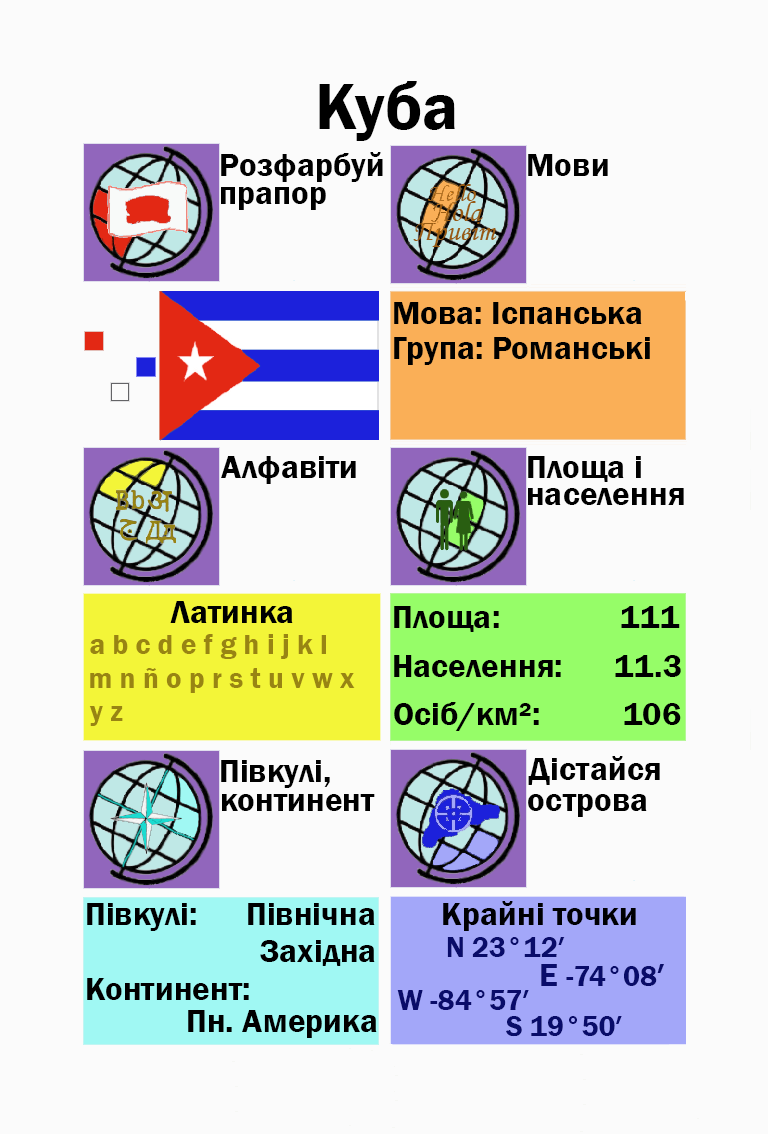
<style>
.page{position:relative;width:768px;height:1134px;background:#fbfbfb}
.page>*{position:absolute;margin:0}
.t1{font:66.7px "FranklinGothic-Demi";color:#000000}
.t2{font:33.3px "FranklinGothic-Demi";color:#000000}
.t3{font:33.3px "FranklinGothic-Demi";color:#000003}
.t4{font:29.2px "FranklinGothic-Demi";color:#988413}
.t5{font:29.2px "FranklinGothic-Demi";color:#090c69}
.t6{font:33.3px "FranklinGothic-Demi";color:#090c69}
</style>
<div class="page">
<p class="t1" style="left:319px;top:81px;width:136px;height:60px">Куба</p>
<p class="t2" style="left:221px;top:152px;width:162px;height:30px">Розфарбуй</p>
<p class="t2" style="left:528px;top:154px;width:80px;height:22px">Мови</p>
<p class="t2" style="left:221px;top:187px;width:105px;height:23px">прапор</p>
<p class="t2" style="left:394px;top:302px;width:248px;height:22px">Мова: Іспанська</p>
<p class="t2" style="left:394px;top:337px;width:256px;height:28px">Група: Романські</p>
<p class="t2" style="left:221px;top:456px;width:135px;height:28px">Алфавіти</p>
<p class="t2" style="left:528px;top:456px;width:113px;height:26px">Площа і</p>
<p class="t2" style="left:528px;top:488px;width:156px;height:17px">населення</p>
<p class="t2" style="left:170px;top:601px;width:123px;height:22px">Латинка</p>
<p class="t2" style="left:394px;top:606px;width:105px;height:26px">Площа:</p>
<p class="t3" style="left:621px;top:606px;width:59px;height:22px">111</p>
<p class="t4" style="left:90px;top:634px;width:236px;height:25px">a b c d e f g h i j k l</p>
<p class="t2" style="left:394px;top:655px;width:167px;height:22px">Населення:</p>
<p class="t2" style="left:615px;top:655px;width:66px;height:22px">11.3</p>
<p class="t4" style="left:90px;top:668px;width:265px;height:25px">m n ñ o p r s t u v w x</p>
<p class="t2" style="left:394px;top:702px;width:145px;height:29px">Осіб/км²:</p>
<p class="t4" style="left:89px;top:706px;width:34px;height:20px">y z</p>
<p class="t2" style="left:624px;top:703px;width:57px;height:22px">106</p>
<p class="t2" style="left:221px;top:760px;width:109px;height:28px">Півкулі,</p>
<p class="t2" style="left:528px;top:756px;width:132px;height:29px">Дістайся</p>
<p class="t2" style="left:222px;top:794px;width:153px;height:17px">континент</p>
<p class="t2" style="left:528px;top:794px;width:119px;height:23px">острова</p>
<p class="t2" style="left:87px;top:903px;width:109px;height:28px">Півкулі:</p>
<p class="t2" style="left:248px;top:903px;width:127px;height:22px">Північна</p>
<p class="t3" style="left:443px;top:901px;width:193px;height:30px">Крайні точки</p>
<p class="t2" style="left:260px;top:940px;width:115px;height:26px">Західна</p>
<p class="t5" style="left:447px;top:937px;width:118px;height:20px">N 23°12′</p>
<p class="t5" style="left:541px;top:964px;width:123px;height:22px"><span class="t6">E </span>-74°08<span class="t6">′</span></p>
<p class="t2" style="left:87px;top:978px;width:162px;height:22px">Континент:</p>
<p class="t5" style="left:397px;top:990px;width:132px;height:20px">W -84°57′</p>
<p class="t2" style="left:188px;top:1010px;width:189px;height:28px">Пн. Америка</p>
<p class="t5" style="left:506px;top:1016px;width:116px;height:21px">S 19°50′</p>
</div>
